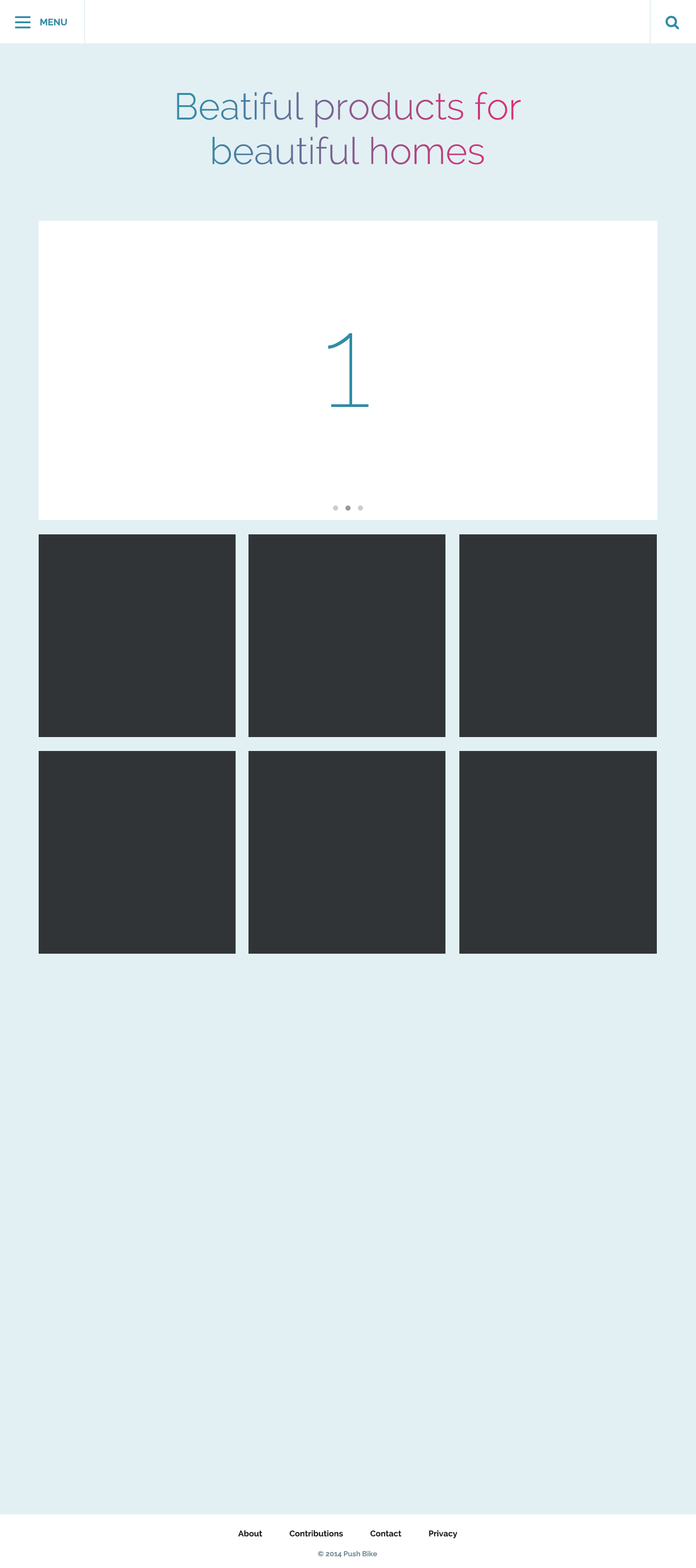
<style>
.page{position:relative;width:696px;height:1568px;background:#e2f0f4}
.page>*{position:absolute;margin:0}
.t1{font:9.3px "Raleway-Bold";color:#2f8ca7}
.t2{font:37.1px "Raleway-Light"}
.t3{font:128.9px "Raleway-Thin";color:#2f8ca7}
.t4{font:8.3px "Raleway-Bold";color:#231f20}
.t5{font:7.2px "Raleway-Bold";color:#79939b}
</style>
<div class="page">
<p class="t1" style="left:40px;top:19px;width:27px;height:7px">MENU</p>
<p class="t2" style="left:177px;top:92px;width:344px;height:73px;text-align:center">Beatiful products for beautiful homes</p>
<p class="t3" style="left:328px;top:333px;width:41px;height:74px">1</p>
<p class="t4" style="left:238px;top:1530px;width:220px;height:9px">About Contributions Contact Privacy</p>
<p class="t5" style="left:318px;top:1550px;width:60px;height:7px">© 2014 Push Bike</p>
</div>
